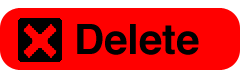
<style>
.page{position:relative;width:240px;height:80px;background:#ff0000}
.page>*{position:absolute;margin:0}
.t1{font:41.7px "Helvetica-Bold";color:#000000}
</style>
<div class="page">
<p class="t1" style="left:77px;top:24px;width:122px;height:31px">Delete</p>
</div>
